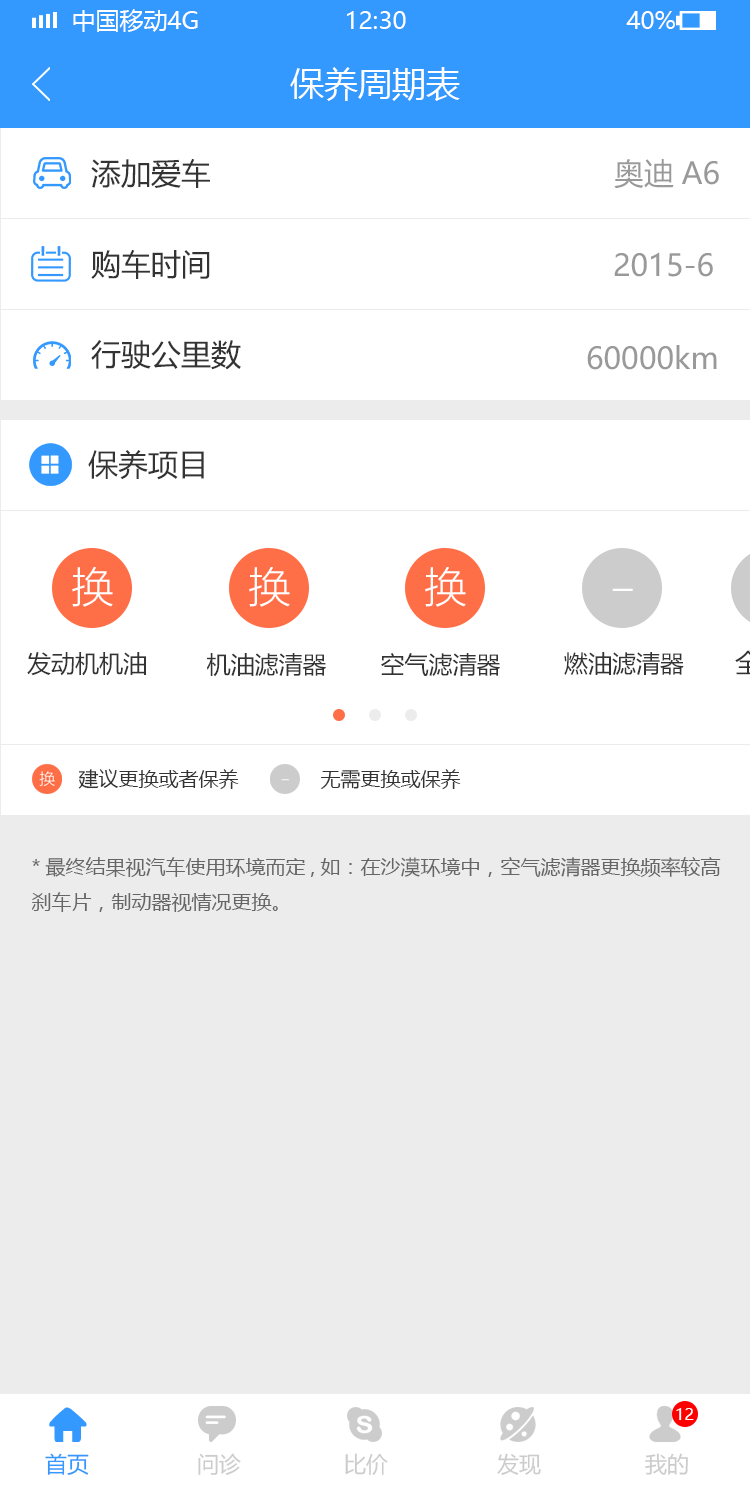
<style>
.page{position:relative;width:750px;height:1492px;background:#ffffff}
.page>*{position:absolute;margin:0}
.t1{font:24px "MicrosoftYaHei";color:#ffffff;text-transform:uppercase}
.t2{font:34px "MicrosoftYaHei";color:#ffffff}
.t3{font:30px "MicrosoftYaHei";color:#333333}
.t4{font:30px "MicrosoftYaHei";color:#999999}
.t5{font:24px "MicrosoftYaHei";color:#333333}
.t6{font:20px "MicrosoftYaHei";color:#333333}
.t7{font:20px "MicrosoftYaHei";color:#666666}
.t8{font:16px "MicrosoftYaHei";color:#ffffff}
.t9{font:22px "MicrosoftYaHei";color:#3399ff}
.t10{font:22px "MicrosoftYaHei";color:#cccccc}
</style>
<div class="page">
<p class="t1" style="left:73px;top:9px;width:125px;height:23px">中国移动4G</p>
<p class="t1" style="left:347px;top:11px;width:59px;height:18px">12:30</p>
<p class="t1" style="left:626px;top:11px;width:49px;height:18px">40%</p>
<p class="t2" style="left:290px;top:67px;width:170px;height:34px">保养周期表</p>
<p class="t3" style="left:91px;top:159px;width:119px;height:29px">添加爱车</p>
<p class="t4" style="left:614px;top:159px;width:105px;height:30px">奥迪A6</p>
<p class="t3" style="left:91px;top:250px;width:119px;height:29px">购车时间</p>
<p class="t4" style="left:614px;top:252px;width:99px;height:25px">2015-6</p>
<p class="t3" style="left:91px;top:340px;width:150px;height:30px">行驶公里数</p>
<p class="t4" style="left:587px;top:345px;width:130px;height:25px">60000km</p>
<p class="t3" style="left:88px;top:450px;width:116px;height:30px">保养项目</p>
<p class="t5" style="left:27px;top:652px;width:119px;height:24px">发动机机油</p>
<p class="t5" style="left:206px;top:653px;width:120px;height:24px">机油滤清器</p>
<p class="t5" style="left:381px;top:653px;width:119px;height:23px">空气滤清器</p>
<p class="t5" style="left:564px;top:652px;width:120px;height:23px">燃油滤清器</p>
<p class="t6" style="left:78px;top:769px;width:161px;height:20px">建议更换或者保养</p>
<p class="t6" style="left:320px;top:769px;width:141px;height:20px">无需更换或保养</p>
<p class="t7" style="left:31px;top:857px;width:690px;height:55px">*最终结果视汽车使用环境而定,如：在沙漠环境中，空气滤清器更换频率较高<br>刹车片，制动器视情况更换。</p>
<p class="t8" style="left:676px;top:1408px;width:18px;height:12px">12</p>
<p class="t9" style="left:45px;top:1453px;width:44px;height:22px">首页</p>
<p class="t10" style="left:198px;top:1453px;width:43px;height:22px">问诊</p>
<p class="t10" style="left:345px;top:1453px;width:43px;height:22px">比价</p>
<p class="t10" style="left:497px;top:1453px;width:44px;height:22px">发现</p>
<p class="t10" style="left:645px;top:1453px;width:43px;height:22px">我的</p>
</div>
